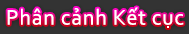
<style>
.page{position:relative;width:189px;height:34px;background:#333333}
.page>*{position:absolute;margin:0}
.t1{font:22px "Corbel";letter-spacing:0.035em;color:#ffffff}
</style>
<div class="page">
<p class="t1" style="left:7px;top:7px;width:177px;height:21px">Phân cảnh Kết cục</p>
</div>
